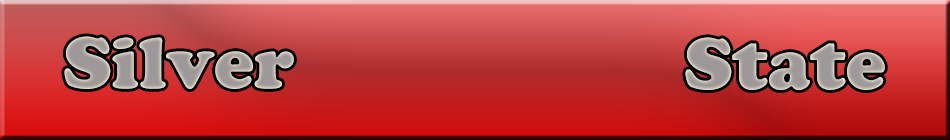
<style>
.page{position:relative;width:950px;height:140px}
.page>*{position:absolute;margin:0}
.t1{font:72px "CooperBlackStd";color:#9e9898}
</style>
<div class="page">
<p class="t1" style="left:64px;top:36px;width:230px;height:53px">Silver</p>
<p class="t1" style="left:685px;top:37px;width:200px;height:53px">State</p>
</div>
